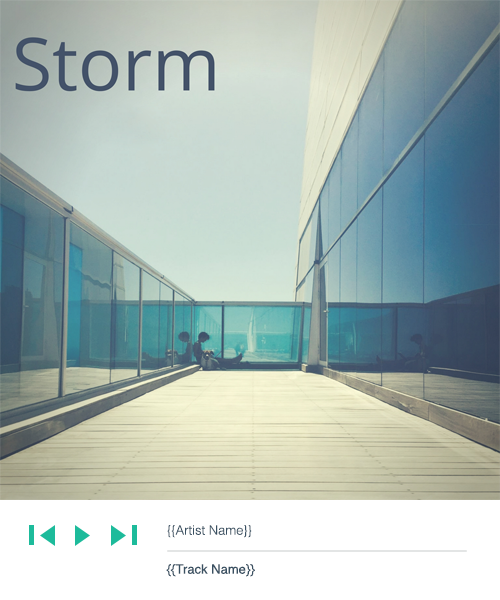
<style>
.page{position:relative;width:500px;height:600px}
.page>*{position:absolute;margin:0}
.t1{font:13px "Helvetica-Light";color:#395062}
.t2{font:13px "Helvetica";color:#395062}
</style>
<div class="page">
<p class="t1" style="left:167px;top:525px;width:85px;height:13px">{{Artist Name}}</p>
<p class="t2" style="left:166px;top:564px;width:89px;height:13px">{{Track Name}}</p>
</div>
